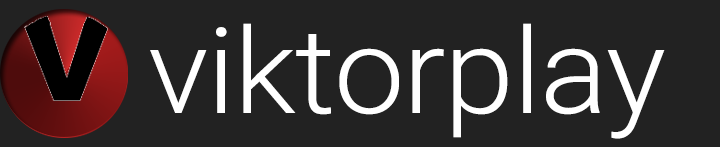
<style>
.page{position:relative;width:720px;height:147px;background:#222222}
.page>*{position:absolute;margin:0}
.t1{font:119px "Roboto-Light";letter-spacing:-0.01em;color:#ffffff;scale:1.06 1}
</style>
<div class="page">
<p class="t1" style="left:150px;top:23px;width:515px;height:116px">viktorplay</p>
</div>
